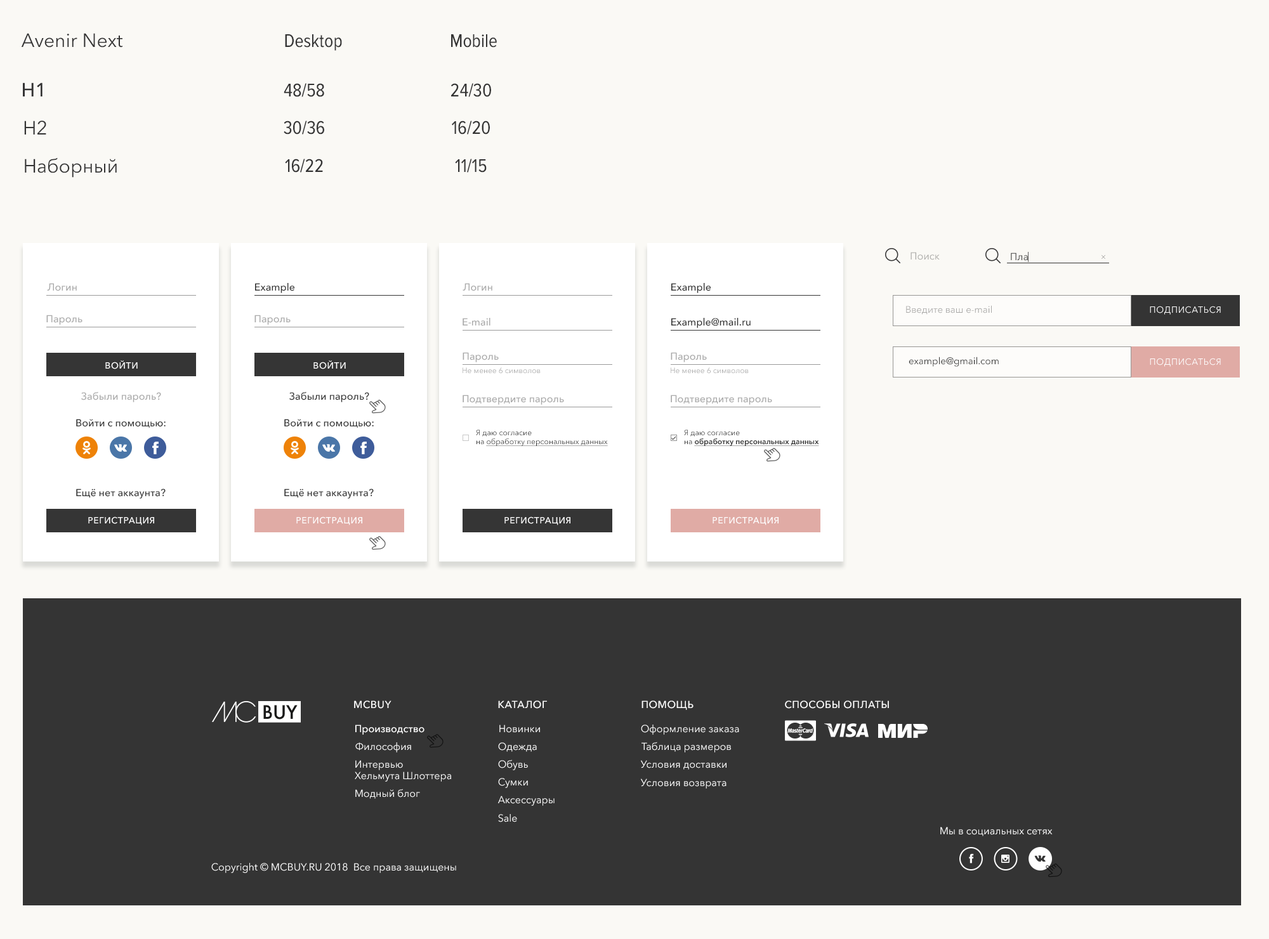
<style>
.page{position:relative;width:1269px;height:939px;background:#faf9f5}
.page>*{position:absolute;margin:0}
.t1{font:19px "AvenirNextCyr-Regular";color:#343434}
.t2{font:19px "ProximaNovaCond-Regular";color:#343434}
.t3{font:19px "AvenirNextCyr-Medium";color:#343434}
.t4{font:10.2px "AvenirNextCyr-Regular";color:#a7a7a4}
.t5{font:10.2px "AvenirNextCyr-Regular";color:#333333}
.t6{font:10.2px "AvenirNextCyr-Medium";color:#aaaaaa}
.t7{font:10.2px "AvenirNextCyr-Medium";color:#333333}
.t8{font:9.5px "AvenirNextCyr-Regular";color:#a9a8a7}
.t9{font:8.9px "AvenirNextCyr-Regular";letter-spacing:0.05em;color:#ffffff}
.t10{font:8.9px "AvenirNextCyr-Medium";letter-spacing:0.05em;color:#ffffff}
.t11{font:9.5px "AvenirNextCyr-Regular";color:#333333}
.t12{font:7.6px "AvenirNextCyr-Regular";color:#aaaaaa}
.t13{font:7.6px/8.9px "AvenirNextCyr-Regular";color:#333333;text-decoration:underline}
.t14{font:7.6px/8.9px "AvenirNextCyr-Regular";color:#333333}
.t15{font:7.6px/8.9px "AvenirNextCyr-Demi";color:#333333;text-decoration:underline}
.t16{font:10.2px "AvenirNextCyr-Medium";letter-spacing:0.03em;color:#ffffff}
.t17{font:10.2px "AvenirNextCyr-Medium";color:#ffffff}
.t18{font:10.2px "AvenirNextCyr-Regular";color:#ffffff}
.t19{font:10.2px/11.4px "AvenirNextCyr-Regular";color:#ffffff}
</style>
<div class="page">
<p class="t1" style="left:21px;top:33px;width:101px;height:15px">Avenir Next</p>
<p class="t2" style="left:285px;top:34px;width:57px;height:17px">Desktop</p>
<p class="t2" style="left:451px;top:34px;width:46px;height:14px">Mobile</p>
<p class="t3" style="left:23px;top:83px;width:20px;height:13px">H1</p>
<p class="t2" style="left:284px;top:83px;width:40px;height:14px">48/58</p>
<p class="t2" style="left:451px;top:83px;width:40px;height:14px">24/30</p>
<p class="t1" style="left:24px;top:121px;width:22px;height:14px">H2</p>
<p class="t2" style="left:284px;top:121px;width:40px;height:14px">30/36</p>
<p class="t2" style="left:452px;top:121px;width:38px;height:14px">16/20</p>
<p class="t1" style="left:25px;top:158px;width:92px;height:20px">Наборный</p>
<p class="t2" style="left:285px;top:159px;width:38px;height:14px">16/22</p>
<p class="t2" style="left:455px;top:159px;width:32px;height:14px">11/15</p>
<p class="t4" style="left:911px;top:252px;width:29px;height:8px">Поиск</p>
<p class="t5" style="left:1011px;top:253px;width:17px;height:8px">Пла</p>
<p class="t6" style="left:47px;top:283px;width:30px;height:8px">Логин</p>
<p class="t7" style="left:255px;top:283px;width:40px;height:10px">Example</p>
<p class="t6" style="left:463px;top:283px;width:30px;height:8px">Логин</p>
<p class="t7" style="left:672px;top:283px;width:39px;height:10px">Example</p>
<p class="t8" style="left:906px;top:305px;width:86px;height:10px">Введите ваш e-mail</p>
<p class="t9" style="left:1150px;top:306px;width:71px;height:9px">ПОДПИСАТЬСЯ</p>
<p class="t6" style="left:46px;top:315px;width:37px;height:10px">Пароль</p>
<p class="t6" style="left:255px;top:315px;width:36px;height:10px">Пароль</p>
<p class="t6" style="left:463px;top:318px;width:28px;height:8px">E-mail</p>
<p class="t7" style="left:672px;top:318px;width:79px;height:10px">Example@mail.ru</p>
<p class="t6" style="left:463px;top:352px;width:36px;height:10px">Пароль</p>
<p class="t6" style="left:671px;top:352px;width:36px;height:10px">Пароль</p>
<p class="t10" style="left:105px;top:361px;width:33px;height:8px">ВОЙТИ</p>
<p class="t10" style="left:314px;top:361px;width:32px;height:8px">ВОЙТИ</p>
<p class="t11" style="left:909px;top:357px;width:90px;height:10px">example@gmail.com</p>
<p class="t9" style="left:1150px;top:358px;width:71px;height:9px">ПОДПИСАТЬСЯ</p>
<p class="t12" style="left:463px;top:367px;width:78px;height:7px">Не менее 6 символов</p>
<p class="t12" style="left:671px;top:367px;width:78px;height:7px">Не менее 6 символов</p>
<p class="t6" style="left:81px;top:392px;width:80px;height:10px">Забыли пароль?</p>
<p class="t7" style="left:289px;top:392px;width:80px;height:10px">Забыли пароль?</p>
<p class="t6" style="left:463px;top:395px;width:101px;height:10px">Подтвердите пароль</p>
<p class="t6" style="left:671px;top:395px;width:101px;height:10px">Подтвердите пароль</p>
<p class="t7" style="left:76px;top:419px;width:90px;height:9px">Войти с помощью:</p>
<p class="t7" style="left:284px;top:419px;width:90px;height:9px">Войти с помощью:</p>
<p class="t13" style="left:476px;top:430px;width:132px;height:16px"><span class="t14">Я даю согласие <br>на </span>обработку персональных данных</p>
<p class="t15" style="left:684px;top:430px;width:135px;height:16px"><span class="t14">Я даю согласие <br>на </span>обработку персональных данных</p>
<p class="t7" style="left:76px;top:489px;width:90px;height:10px">Ещё нет аккаунта?</p>
<p class="t7" style="left:284px;top:489px;width:90px;height:10px">Ещё нет аккаунта?</p>
<p class="t10" style="left:88px;top:517px;width:66px;height:9px">РЕГИСТРАЦИЯ</p>
<p class="t10" style="left:296px;top:517px;width:66px;height:9px">РЕГИСТРАЦИЯ</p>
<p class="t10" style="left:505px;top:517px;width:66px;height:9px">РЕГИСТРАЦИЯ</p>
<p class="t10" style="left:713px;top:517px;width:66px;height:9px">РЕГИСТРАЦИЯ</p>
<p class="t16" style="left:354px;top:701px;width:38px;height:8px">MCBUY</p>
<p class="t16" style="left:498px;top:701px;width:49px;height:8px">КАТАЛОГ</p>
<p class="t16" style="left:642px;top:701px;width:52px;height:9px">ПОМОЩЬ</p>
<p class="t16" style="left:785px;top:701px;width:104px;height:8px">СПОСОБЫ ОПЛАТЫ</p>
<p class="t17" style="left:355px;top:725px;width:70px;height:10px">Производство</p>
<p class="t18" style="left:500px;top:725px;width:40px;height:8px">Новинки</p>
<p class="t18" style="left:641px;top:725px;width:98px;height:10px">Оформление заказа</p>
<p class="t18" style="left:355px;top:743px;width:56px;height:10px">Философия</p>
<p class="t18" style="left:498px;top:743px;width:39px;height:9px">Одежда</p>
<p class="t18" style="left:642px;top:742px;width:89px;height:11px">Таблица размеров</p>
<p class="t19" style="left:355px;top:760px;width:96px;height:22px">Интервью <br>Хельмута Шлоттера</p>
<p class="t18" style="left:498px;top:760px;width:30px;height:11px">Обувь</p>
<p class="t18" style="left:641px;top:760px;width:86px;height:10px">Условия доставки</p>
<p class="t18" style="left:498px;top:778px;width:30px;height:10px">Сумки</p>
<p class="t18" style="left:641px;top:779px;width:86px;height:10px">Условия возврата</p>
<p class="t18" style="left:355px;top:789px;width:65px;height:10px">Модный блог</p>
<p class="t18" style="left:498px;top:796px;width:57px;height:10px">Аксессуары</p>
<p class="t18" style="left:498px;top:814px;width:19px;height:9px">Sale</p>
<p class="t18" style="left:941px;top:827px;width:112px;height:10px">Мы в социальных сетях</p>
<p class="t18" style="left:211px;top:863px;width:245px;height:10px">Copyright © MCBUY.RU 2018  Все права защищены</p>
</div>
